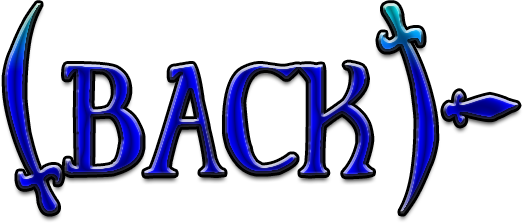
<style>
.page{position:relative;width:523px;height:223px;background:#ffffff}
.page>*{position:absolute;margin:0}
.t1{font:108px "EGDragonCaps";font-weight:bold;scale:0.83 1}
.t2{font:135px "EGDragonCaps";font-weight:bold;scale:0.83 1}
</style>
<div class="page">
<p class="t1" style="left:4px;top:3px;width:515px;height:211px"><span class="t2">-</span>(back)</p>
</div>
